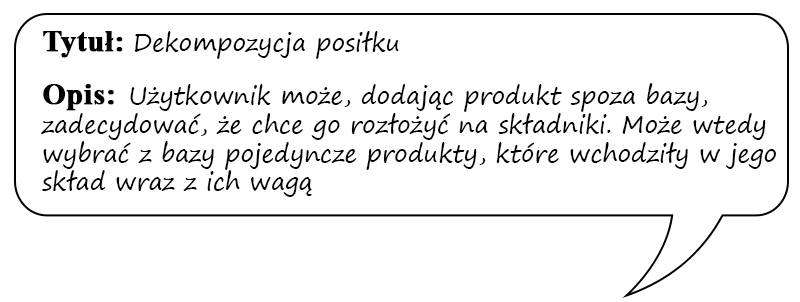
<style>
.page{position:relative;width:800px;height:302px;background:#ffffff}
.page>*{position:absolute;margin:0}
.t1{font:24px "SegoePrint";color:#000000}
.t2{font:30px "TimesNewRomanPS-BoldMT";color:#000000;font-weight:bold}
</style>
<div class="page">
<p class="t1" style="left:41px;top:31px;width:735px;height:166px"><span class="t2">Tytuł: </span>Dekompozycja posiłku<br><br><span class="t2">Opis:  </span>Użytkownik może, dodając produkt spoza bazy, zadecydować, że chce go rozłożyć na składniki. Może wtedy wybrać z bazy pojedyncze produkty, które wchodziły w jego skład wraz z ich wagą</p>
</div>
